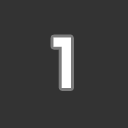
<style>
.page{position:relative;width:128px;height:128px;background:#333333}
.page>*{position:absolute;margin:0}
.t1{font:72px "Audiowide-Regular";color:#ffffff}
</style>
<div class="page">
<p class="t1" style="left:53px;top:37px;width:18px;height:51px">1</p>
</div>
